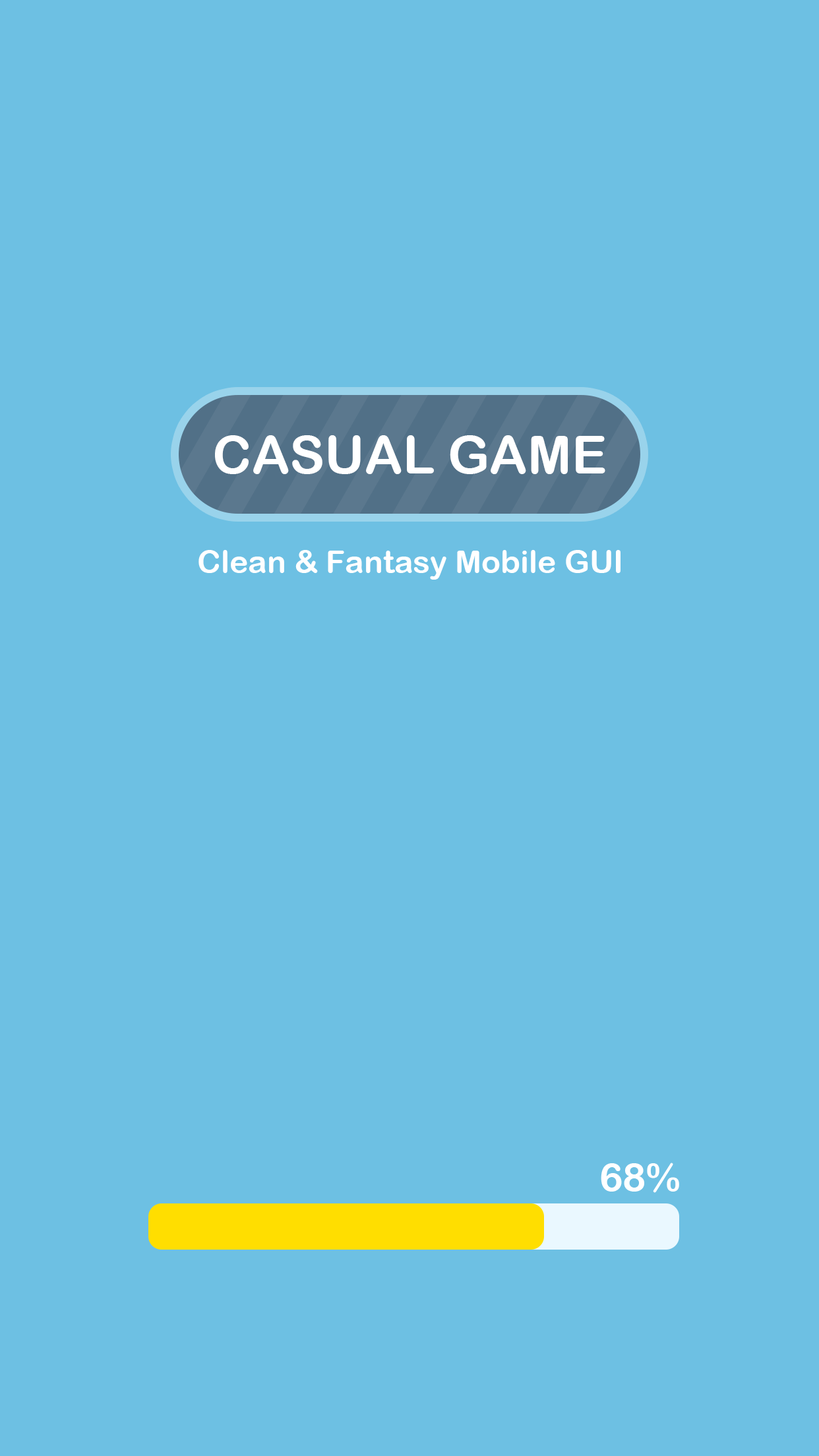
<style>
.page{position:relative;width:819px;height:1456px;background:#6dc0e3}
.page>*{position:absolute;margin:0}
.t1{font:52.8px "ArialRoundedMTBold";color:#ffffff;text-transform:uppercase}
.t2{font:31.7px "ArialRoundedMTBold";color:#ffffff}
.t3{font:39.6px "ArialRoundedMTBold";color:#ffffff}
</style>
<div class="page">
<p class="t1" style="left:215px;top:435px;width:390px;height:39px">Casual Game</p>
<p class="t2" style="left:198px;top:550px;width:423px;height:30px">Clean &amp; Fantasy Mobile GUI</p>
<p class="t3" style="left:601px;top:1163px;width:78px;height:30px">68%</p>
</div>
